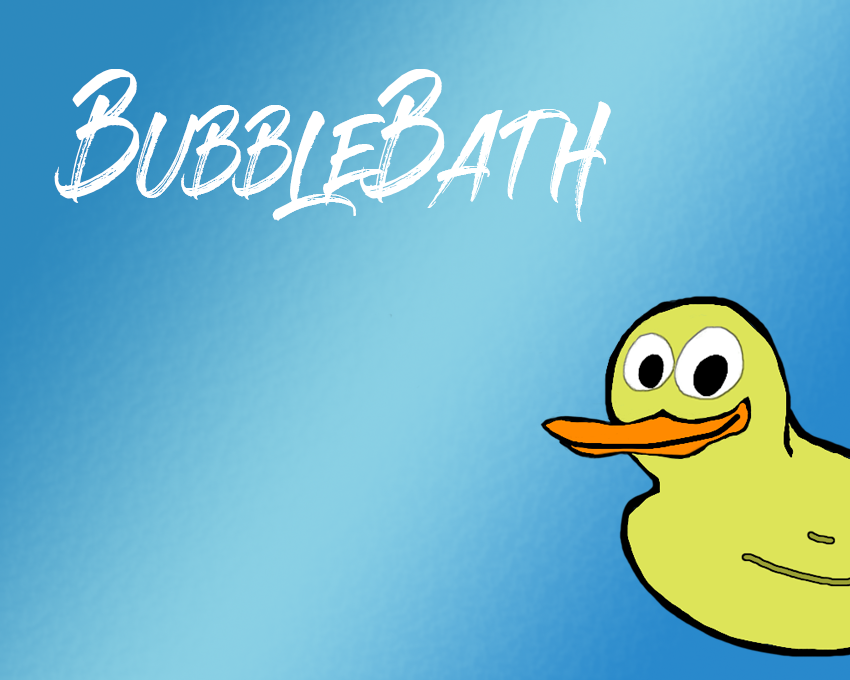
<style>
.page{position:relative;width:850px;height:680px}
.page>*{position:absolute;margin:0}
.t1{font:112.4px "GlossAndBloom";color:#ffffff;font-variant:small-caps;scale:0.9 1}
</style>
<div class="page">
<p class="t1" style="left:54px;top:69px;width:557px;height:153px">BubbleBath</p>
</div>
